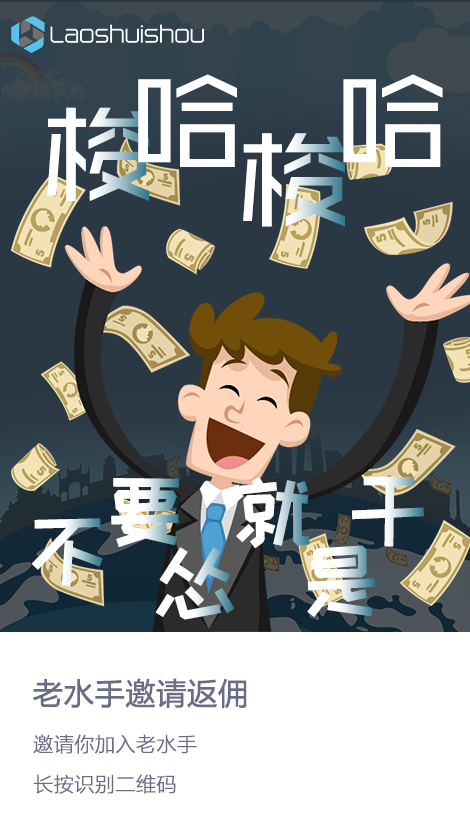
<style>
.page{position:relative;width:470px;height:840px;background:#ffffff}
.page>*{position:absolute;margin:0}
.t1{font:114.6px "BigYoungMediumGB2.0";color:#ffffff;font-weight:bold}
.t2{font:114.6px "BigYoungMediumGB2.0";font-weight:bold}
.t3{font:83.7px "HappyZcool-2016";font-weight:bold}
.t4{font:83.7px "HappyZcool-2016";color:#ffffff;font-weight:bold}
.t5{font:30px "MicrosoftYaHei";color:#696d88;font-weight:bold}
.t6{font:20px/40px "MicrosoftYaHeiLight";color:#696d88;font-weight:bold}
</style>
<div class="page">
<p class="t1" style="left:138px;top:74px;width:99px;height:93px">哈</p>
<p class="t1" style="left:343px;top:74px;width:100px;height:93px">哈</p>
<p class="t1" style="left:47px;top:107px;width:103px;height:94px">梭</p>
<p class="t2" style="left:243px;top:133px;width:102px;height:94px">梭</p>
<p class="t3" style="left:111px;top:478px;width:68px;height:69px">要</p>
<p class="t3" style="left:236px;top:477px;width:74px;height:72px">就</p>
<p class="t4" style="left:352px;top:476px;width:72px;height:71px">干</p>
<p class="t4" style="left:32px;top:518px;width:71px;height:68px">不</p>
<p class="t3" style="left:307px;top:545px;width:69px;height:72px">是</p>
<p class="t3" style="left:155px;top:547px;width:80px;height:73px">怂</p>
<p class="t5" style="left:33px;top:678px;width:214px;height:31px">老水手邀请返佣</p>
<p class="t6" style="left:33px;top:734px;width:164px;height:60px">邀请你加入老水手<br>长按识别二维码</p>
</div>
